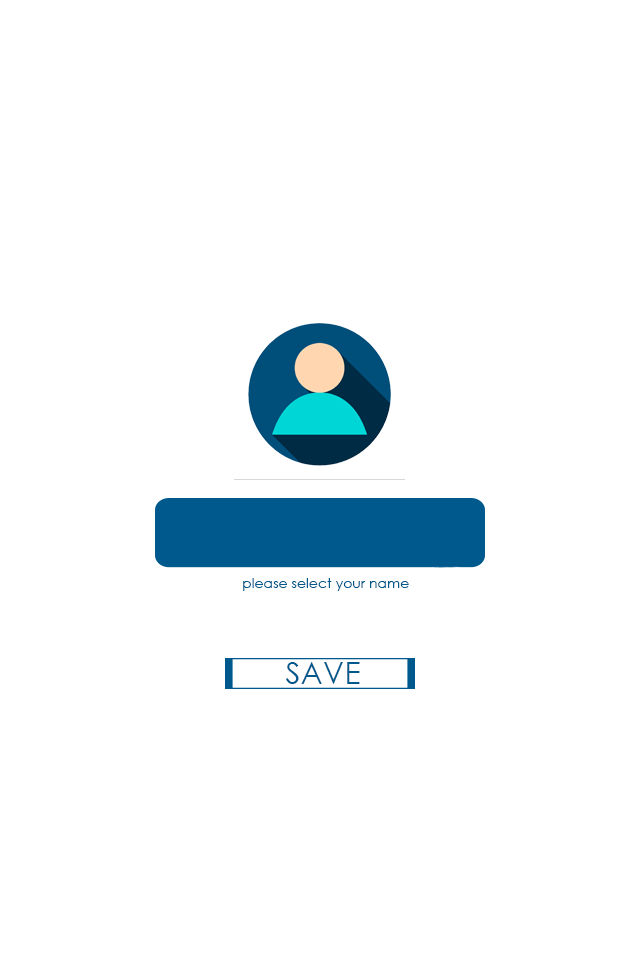
<style>
.page{position:relative;width:640px;height:960px;background:#ffffff}
.page>*{position:absolute;margin:0}
.t1{font:14px "CenturyGothic";color:#00598c}
.t2{font:30.2px "CenturyGothic";color:#00598c}
</style>
<div class="page">
<p class="t1" style="left:243px;top:578px;width:166px;height:13px">please select your name</p>
<p class="t2" style="left:286px;top:662px;width:74px;height:22px">SAVE</p>
</div>
